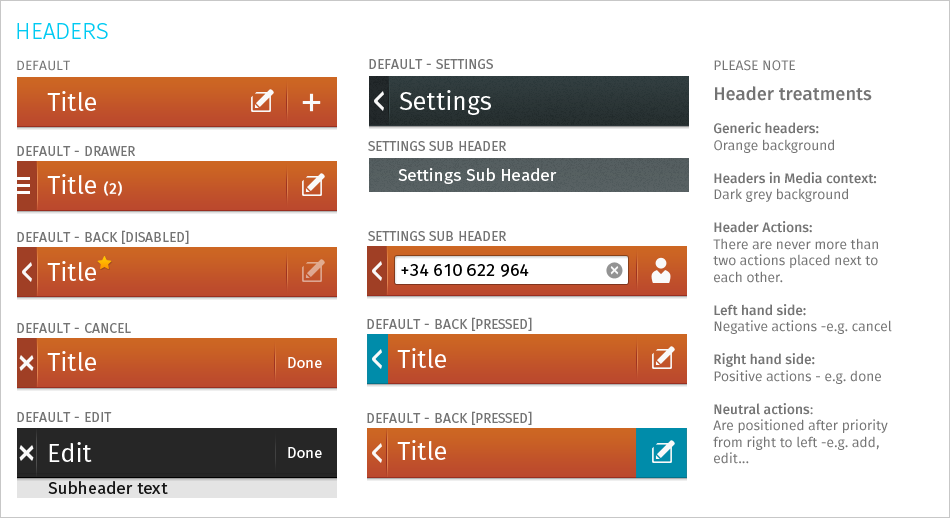
<style>
.page{position:relative;width:950px;height:518px;background:#ffffff}
.page>*{position:absolute;margin:0}
.t1{font:22.9px "MozLight";color:#00caf2;text-transform:uppercase}
.t2{font:13.6px "Moz";color:#747474;text-transform:uppercase}
.t3{font:13.8px "Moz";color:#747474;text-transform:uppercase}
.t4{font:13.7px "Moz";color:#747474}
.t5{font:13.7px/30px "Moz";color:#747474;text-transform:uppercase}
.t6{font:18.3px/29.8px "MozMedium";color:#747474}
.t7{font:13.7px "MozMedium";color:#747474}
.t8{font:25.2px "Moz";color:#ffffff}
.t9{font:14.9px "MozMedium";color:#ffffff}
.t10{font:17.2px "Moz";color:#ffffff}
.t11{font:17.2px "Moz";color:#000000}
.t12{font:14.9px "Moz";color:#ffffff}
.t13{font:17.2px "Moz";color:#161616}
</style>
<div class="page">
<p class="t1" style="left:17px;top:23px;width:91px;height:16px">headers</p>
<p class="t2" style="left:17px;top:60px;width:53px;height:11px">Default</p>
<p class="t3" style="left:369px;top:59px;width:124px;height:10px">Default - settings</p>
<p class="t4" style="left:713px;top:60px;width:179px;height:404px"><span class="t5">please note<br></span><span class="t6">Header treatments<br></span><span class="t7"><br>Generic headers: <br></span>Orange background<br><br><span class="t7">Headers in Media context:<br></span>Dark grey background<br><br><span class="t7">Header Actions:<br></span>There are never more than two actions placed next to each other.<br><br><span class="t7">Left hand side:<br></span>Negative actions -e.g. cancel<br><br><span class="t7">Right hand side:<br></span>Positive actions - e.g. done<br><br><span class="t7">Neutral actions</span>:<br>Are positioned after priority from right to left -e.g. add, edit...</p>
<p class="t8" style="left:47px;top:91px;width:49px;height:20px">Title</p>
<p class="t8" style="left:399px;top:90px;width:92px;height:25px">Settings</p>
<p class="t3" style="left:17px;top:146px;width:118px;height:10px">Default - drawer</p>
<p class="t3" style="left:368px;top:141px;width:138px;height:10px">settings sub header</p>
<p class="t8" style="left:47px;top:174px;width:75px;height:22px">Title <span class="t9">(2)</span></p>
<p class="t10" style="left:398px;top:168px;width:159px;height:16px">Settings Sub Header</p>
<p class="t3" style="left:17px;top:230px;width:172px;height:14px">Default - back [disabled]</p>
<p class="t3" style="left:368px;top:231px;width:138px;height:10px">settings sub header</p>
<p class="t8" style="left:47px;top:261px;width:49px;height:20px">Title</p>
<p class="t11" style="left:401px;top:264px;width:128px;height:13px">+34 610 622 964</p>
<p class="t3" style="left:367px;top:317px;width:165px;height:14px">Default - back [pressed]</p>
<p class="t3" style="left:17px;top:323px;width:114px;height:10px">Default - cancel</p>
<p class="t8" style="left:47px;top:351px;width:49px;height:20px">Title</p>
<p class="t8" style="left:397px;top:348px;width:49px;height:20px">Title</p>
<p class="t12" style="left:288px;top:357px;width:34px;height:11px">Done</p>
<p class="t3" style="left:17px;top:412px;width:95px;height:10px">Default - edit</p>
<p class="t3" style="left:367px;top:411px;width:165px;height:14px">Default - back [pressed]</p>
<p class="t8" style="left:49px;top:442px;width:43px;height:20px">Edit</p>
<p class="t12" style="left:288px;top:447px;width:34px;height:11px">Done</p>
<p class="t8" style="left:397px;top:440px;width:49px;height:20px">Title</p>
<p class="t13" style="left:48px;top:481px;width:120px;height:13px">Subheader text</p>
</div>
